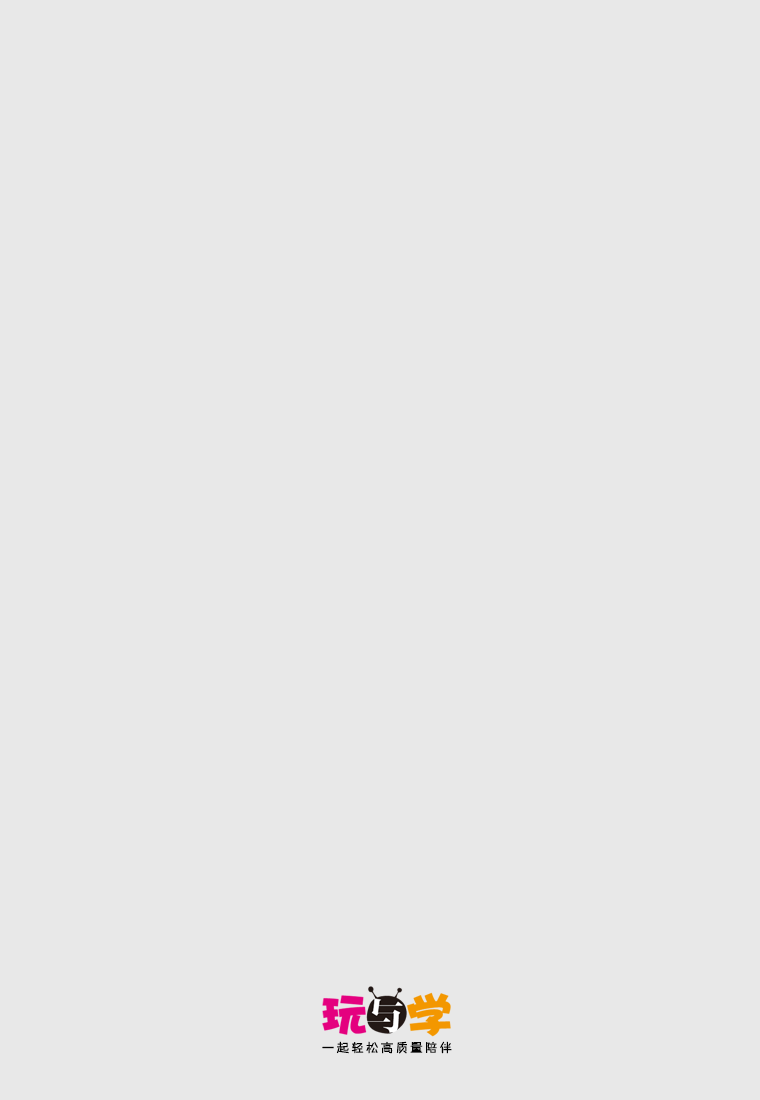
<style>
.page{position:relative;width:760px;height:1100px;background:#e8e8e8}
.page>*{position:absolute;margin:0}
.t1{font:12px "FZZHYJW--GB1-0";letter-spacing:0.2em;color:#000000;font-weight:bold}
</style>
<div class="page">
<p class="t1" style="left:322px;top:1041px;width:130px;height:13px">一起轻松高质量陪伴</p>
</div>
